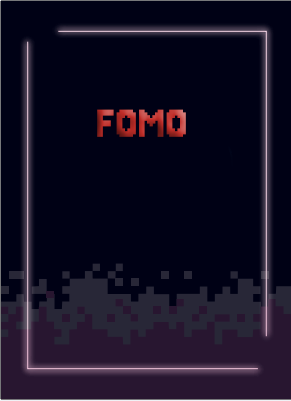
<style>
.page{position:relative;width:291px;height:401px;background:#000115}
.page>*{position:absolute;margin:0}
.t1{font:50px "Jersey10-Regular";letter-spacing:0.025em}
</style>
<div class="page">
<p class="t1" style="left:97px;top:109px;width:89px;height:28px">FOMO</p>
</div>
